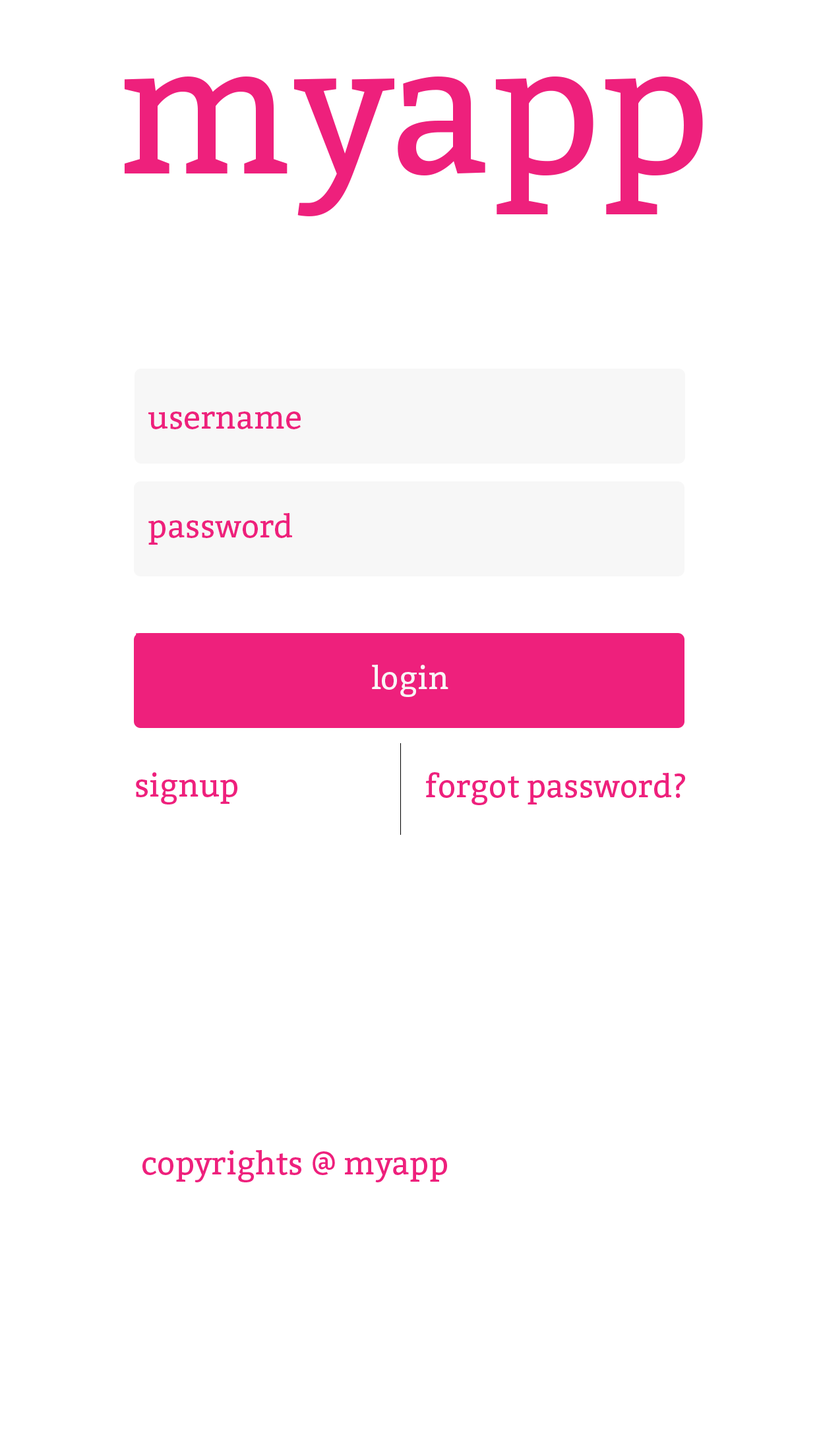
<style>
.page{position:relative;width:819px;height:1456px;background:#ffffff}
.page>*{position:absolute;margin:0}
.t1{font:178.7px "Bitter-Regular";color:#ee207c}
.t2{font:31.7px "Bitter-Regular";color:#ee207c}
.t3{font:31.7px "Bitter-Regular";color:#f9f6f7}
</style>
<div class="page">
<p class="t1" style="left:124px;top:76px;width:579px;height:140px">myapp</p>
<p class="t2" style="left:148px;top:411px;width:153px;height:18px">username</p>
<p class="t2" style="left:148px;top:513px;width:144px;height:32px">password</p>
<p class="t3" style="left:372px;top:665px;width:76px;height:32px">login</p>
<p class="t2" style="left:136px;top:772px;width:101px;height:32px">signup</p>
<p class="t2" style="left:426px;top:772px;width:259px;height:33px">forgot password?</p>
<p class="t2" style="left:142px;top:1150px;width:305px;height:32px">copyrights @ myapp</p>
</div>
